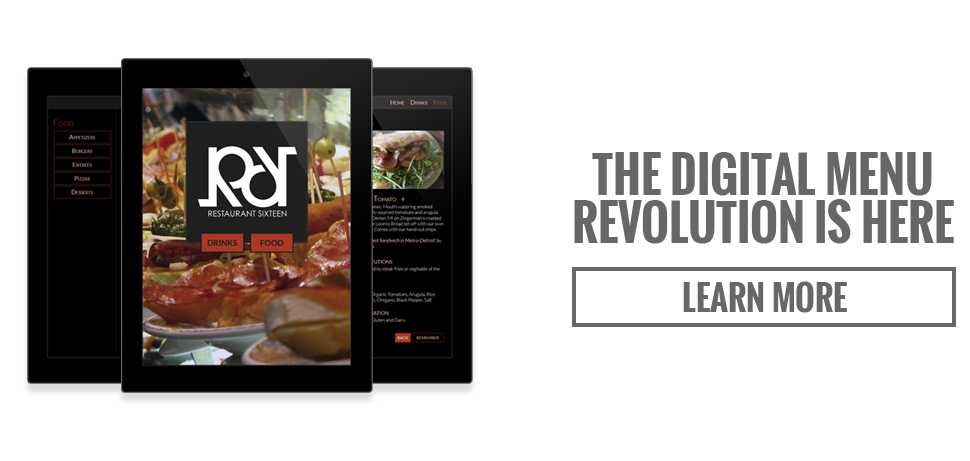
<style>
.page{position:relative;width:970px;height:461px;background:#ffffff}
.page>*{position:absolute;margin:0}
.t1{font:48.2px/171.3px "Oswald-Bold";color:#676767;font-variant:small-caps;scale:0.97 1}
.t2{font:33.1px "Oswald-Bold";color:#676767;text-transform:uppercase}
</style>
<div class="page">
<p class="t1" style="left:574px;top:152px;width:380px;height:92px;text-align:center">THE DIGITAL MENU<br>REVOLUTION IS HERE</p>
<p class="t2" style="left:683px;top:281px;width:164px;height:32px">Learn More</p>
</div>
